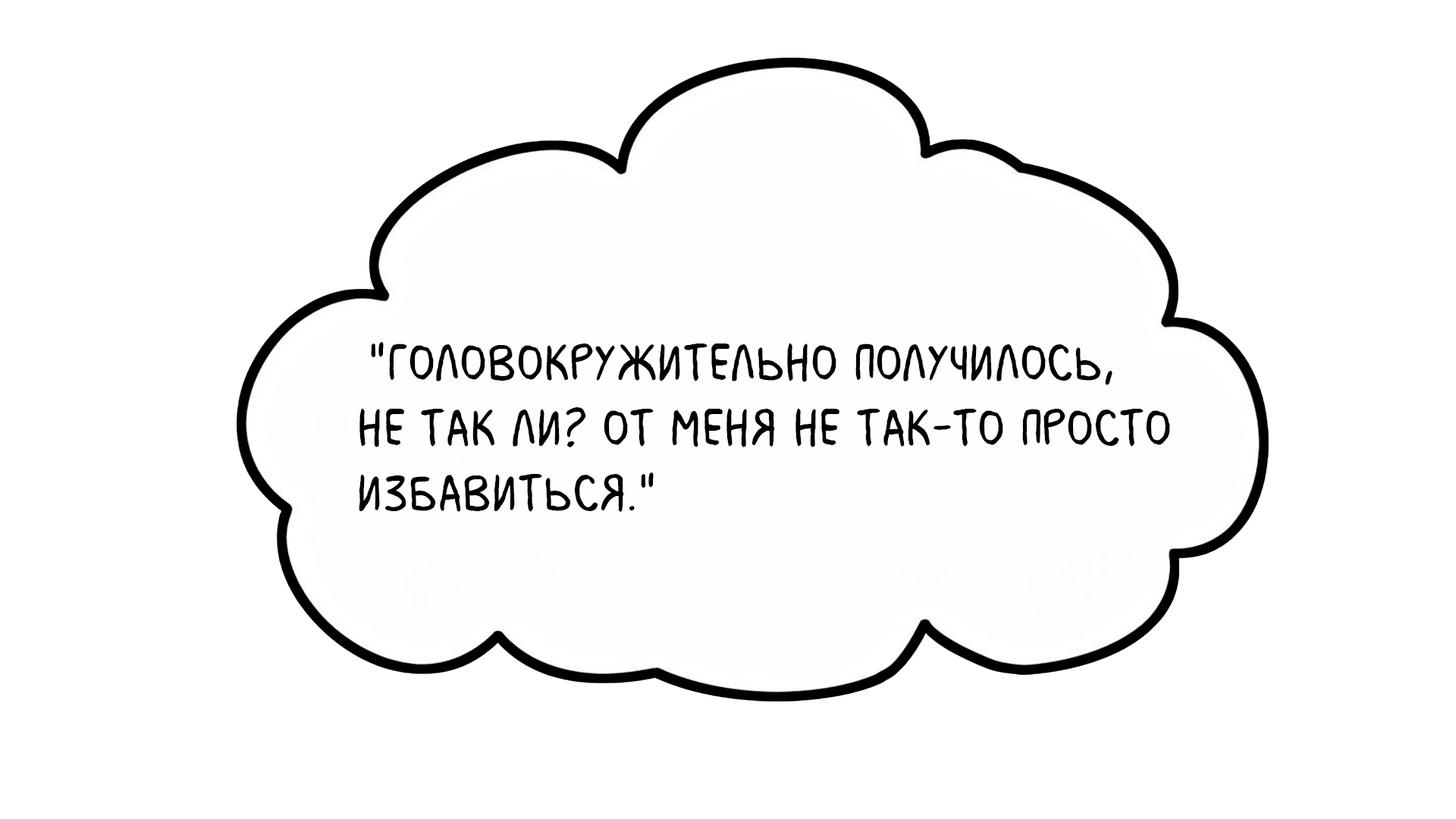
<style>
.page{position:relative;width:1456px;height:819px;background:#ffffff}
.page>*{position:absolute;margin:0}
.t1{font:54.6px "MilkMustacheBB";color:#000000}
.t2{font:54.6px "MyriadPro-Regular";color:#000000}
</style>
<div class="page">
<p class="t1" style="left:359px;top:342px;width:811px;height:170px"><span class="t2"> </span>"Головокружительно получилось, <br>не так ли? От меня не так-то просто <br>избавиться."</p>
</div>
